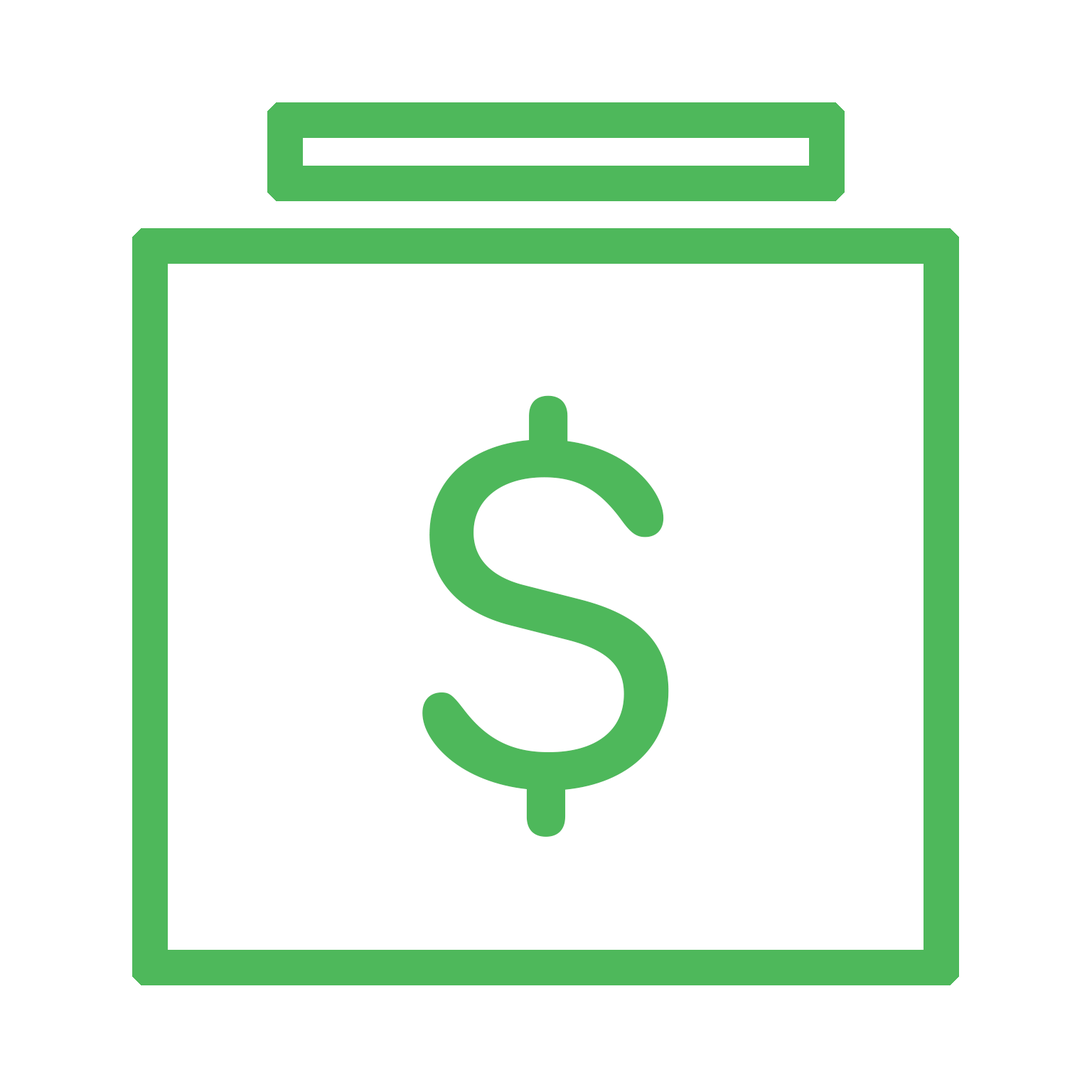
<style>
.page{position:relative;width:1092px;height:1092px;background:#ffffff}
.page>*{position:absolute;margin:0}
.t1{font:518.4px "SFCompactRounded-Regular";color:#4eb85b}
</style>
<div class="page">
<p class="t1" style="left:422px;top:395px;width:247px;height:442px">$</p>
</div>
